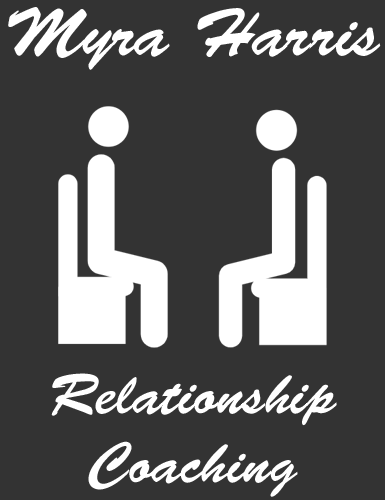
<style>
.page{position:relative;width:385px;height:500px;background:#333333}
.page>*{position:absolute;margin:0}
.t1{font:68px "BrushScriptStd";color:#ffffff}
.t2{font:58px "BrushScriptStd";color:#ffffff}
</style>
<div class="page">
<p class="t1" style="left:8px;top:7px;width:373px;height:63px">Myra Harris</p>
<p class="t2" style="left:51px;top:373px;width:286px;height:124px;text-align:center">Relationship<br>Coaching</p>
</div>
